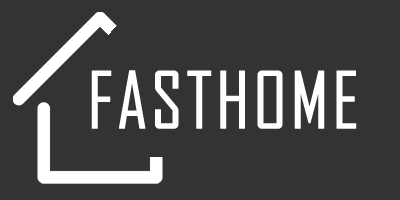
<style>
.page{position:relative;width:400px;height:200px;background:#333333}
.page>*{position:absolute;margin:0}
.t1{font:75px "AgencyFB-Reg";letter-spacing:0.025em;color:#ffffff;font-weight:bold}
</style>
<div class="page">
<p class="t1" style="left:91px;top:70px;width:266px;height:59px">FASTHOME</p>
</div>
